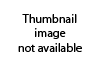
<style>
.page{position:relative;width:100px;height:75px;background:#ffffff}
.page>*{position:absolute;margin:0}
.t1{font:12px "MyriadPro-Regular";color:#000000}
</style>
<div class="page">
<p class="t1" style="left:18px;top:14px;width:64px;height:38px;text-align:center">Thumbnail <br>image <br>not available</p>
</div>
